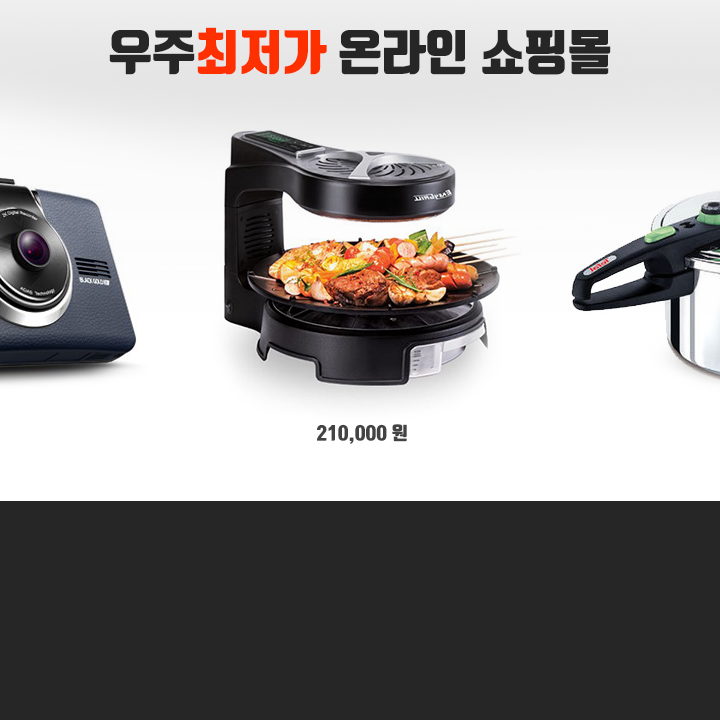
<style>
.page{position:relative;width:720px;height:720px;background:#262626}
.page>*{position:absolute;margin:0}
.t1{font:48px "TmonMonsoriBlack";color:#262626}
.t2{font:48px "TmonMonsoriBlack";color:#ff3000}
.t3{font:18px "TmonMonsoriBlack";color:#434343}
</style>
<div class="page">
<p class="t1" style="left:109px;top:27px;width:502px;height:48px">우주<span class="t2">최저가</span> 온라인 쇼핑몰</p>
<p class="t3" style="left:317px;top:424px;width:90px;height:20px">210,000 원</p>
</div>
